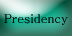
<style>
.page{position:relative;width:72px;height:36px}
.page>*{position:absolute;margin:0}
.t1{font:12px "Batang";color:#000000}
</style>
<div class="page">
<p class="t1" style="left:4px;top:14px;width:64px;height:11px">Presidency</p>
</div>
